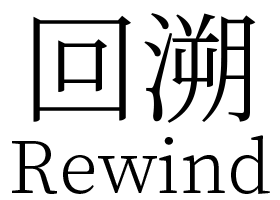
<style>
.page{position:relative;width:280px;height:200px;background:#ffffff}
.page>*{position:absolute;margin:0}
.t1{font:120px "SourceHanSerifCN-Light";color:#000000}
.t2{font:72px "SourceHanSerifCN-Light";color:#000000}
</style>
<div class="page">
<p class="t1" style="left:33px;top:13px;width:223px;height:110px">回溯</p>
<p class="t2" style="left:12px;top:135px;width:258px;height:59px">Rewind</p>
</div>
